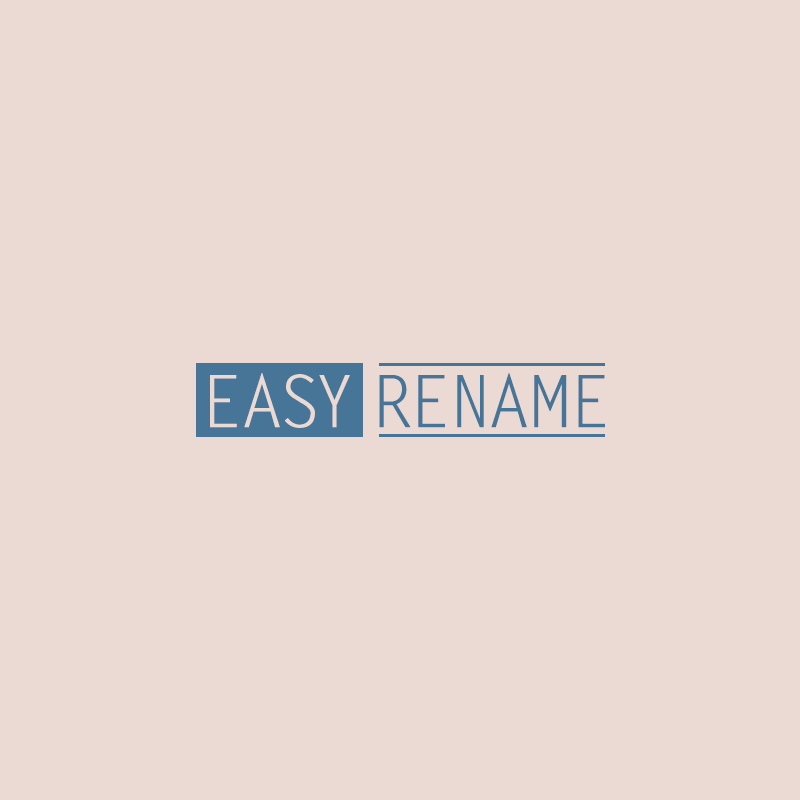
<style>
.page{position:relative;width:800px;height:800px;background:#ebdad4}
.page>*{position:absolute;margin:0}
.t1{font:72px "FZFSJW--GB1-0";color:#ebdad4;font-weight:bold}
.t2{font:72px "FZFSJW--GB1-0";color:#477597;font-weight:bold}
</style>
<div class="page">
<p class="t1" style="left:210px;top:373px;width:140px;height:55px">EASY</p>
<p class="t2" style="left:379px;top:373px;width:226px;height:55px">RENAME</p>
</div>
